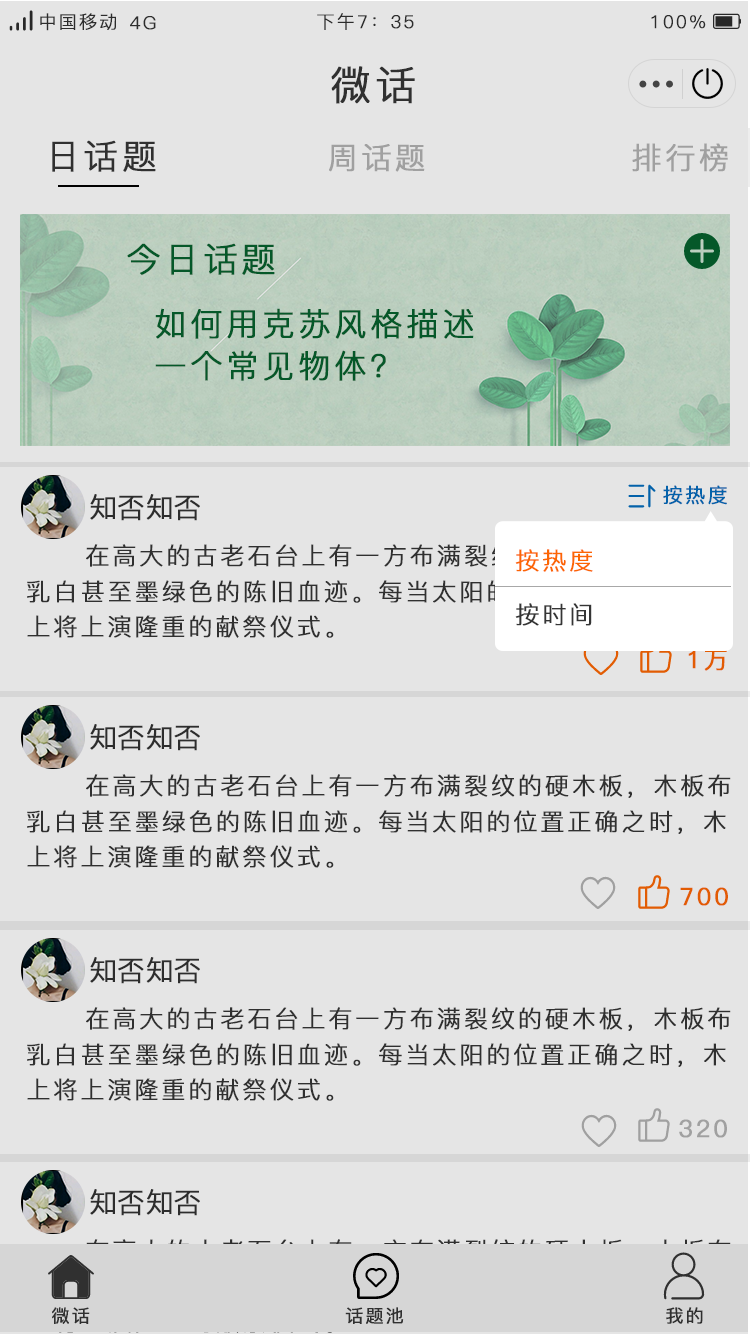
<style>
.page{position:relative;width:750px;height:1334px;background:#e5e5e5}
.page>*{position:absolute;margin:0}
.t1{font:18px "PingFang-SC-Regular";letter-spacing:0.1em;color:#323232;font-weight:bold}
.t2{font:40px "PingFang-SC-Regular";letter-spacing:0.1em;color:#353535;font-weight:bold}
.t3{font:34px "PingFang-SC-Regular";letter-spacing:0.1em;color:#353535;font-weight:bold}
.t4{font:30px "PingFang-SC-Regular";letter-spacing:0.1em;color:#b2b2b2;font-weight:bold}
.t5{font:34px "PingFang-SC-Regular";letter-spacing:0.1em;color:#06622e;font-weight:bold}
.t6{font:32px/42px "PingFang-SC-Regular";letter-spacing:0.1em;color:#06622e;font-weight:bold}
.t7{font:20px "PingFang-SC-Medium";letter-spacing:0.1em;color:#046dbd;font-weight:bold}
.t8{font:28px "PingFang-SC-Regular";letter-spacing:0.1em;color:#323232;font-weight:bold}
.t9{font:24px "PingFang-SC-Regular";letter-spacing:0.1em;color:#353535;font-weight:bold}
.t10{font:24px "PingFang-SC-Regular";letter-spacing:0.1em;color:#fc6603;font-weight:bold}
.t11{font:24px "PingFang-SC-Regular";letter-spacing:0.1em;color:#323232;font-weight:bold}
.t12{font:24px "PingFang-SC-Medium";letter-spacing:0.1em;color:#e25c03;font-weight:bold}
.t13{font:24px "PingFang-SC-Medium";letter-spacing:0.1em;color:#b2b2b2;font-weight:bold}
.t14{font:18px "PingFang-SC-Medium";letter-spacing:0.1em;color:#353535;font-weight:bold}
</style>
<div class="page">
<p class="t1" style="left:40px;top:13px;width:76px;height:18px">中国移动</p>
<p class="t1" style="left:130px;top:16px;width:26px;height:14px">4G</p>
<p class="t1" style="left:317px;top:13px;width:97px;height:17px">下午7：35</p>
<p class="t1" style="left:651px;top:15px;width:55px;height:14px">100%</p>
<p class="t2" style="left:331px;top:66px;width:84px;height:38px">微话</p>
<p class="t3" style="left:52px;top:140px;width:104px;height:32px">日话题</p>
<p class="t4" style="left:329px;top:144px;width:96px;height:28px">周话题</p>
<p class="t4" style="left:632px;top:143px;width:96px;height:29px">排行榜</p>
<p class="t5" style="left:127px;top:243px;width:148px;height:32px">今日话题</p>
<p class="t6" style="left:155px;top:308px;width:319px;height:73px">如何用克苏风格描述<br>一个常见物体？</p>
<p class="t7" style="left:663px;top:485px;width:64px;height:20px">按热度</p>
<p class="t8" style="left:90px;top:494px;width:110px;height:27px">知否知否</p>
<p class="t9" style="left:86px;top:544px;width:645px;height:24px">在高大的古老石台上有一方布满裂纹的硬木板，木板布</p>
<p class="t10" style="left:515px;top:549px;width:78px;height:23px">按热度</p>
<p class="t9" style="left:27px;top:580px;width:699px;height:24px">乳白甚至墨绿色的陈旧血迹。每当太阳的位置正确之时，木</p>
<p class="t9" style="left:515px;top:603px;width:77px;height:23px">按时间</p>
<p class="t9" style="left:27px;top:615px;width:307px;height:23px">上将上演隆重的献祭仪式<span class="t11">。</span></p>
<p class="t12" style="left:688px;top:650px;width:39px;height:21px">1万</p>
<p class="t8" style="left:90px;top:724px;width:110px;height:27px">知否知否</p>
<p class="t9" style="left:86px;top:774px;width:645px;height:24px">在高大的古老石台上有一方布满裂纹的硬木板，木板布</p>
<p class="t9" style="left:27px;top:810px;width:699px;height:24px">乳白甚至墨绿色的陈旧血迹。每当太阳的位置正确之时，木</p>
<p class="t9" style="left:27px;top:845px;width:307px;height:23px">上将上演隆重的献祭仪式<span class="t11">。</span></p>
<p class="t12" style="left:680px;top:887px;width:48px;height:19px">700</p>
<p class="t8" style="left:90px;top:957px;width:110px;height:27px">知否知否</p>
<p class="t9" style="left:86px;top:1007px;width:645px;height:24px">在高大的古老石台上有一方布满裂纹的硬木板，木板布</p>
<p class="t9" style="left:27px;top:1043px;width:699px;height:24px">乳白甚至墨绿色的陈旧血迹。每当太阳的位置正确之时，木</p>
<p class="t9" style="left:27px;top:1078px;width:307px;height:23px">上将上演隆重的献祭仪式<span class="t11">。</span></p>
<p class="t13" style="left:679px;top:1119px;width:48px;height:19px">320</p>
<p class="t8" style="left:90px;top:1189px;width:110px;height:27px">知否知否</p>
<p class="t14" style="left:52px;top:1307px;width:38px;height:17px">微话</p>
<p class="t14" style="left:345px;top:1307px;width:59px;height:17px">话题池</p>
<p class="t14" style="left:666px;top:1307px;width:37px;height:17px">我的</p>
</div>
